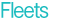
<style>
.page{position:relative;width:82px;height:21px;background:#ffffff}
.page>*{position:absolute;margin:0}
.t1{font:20px "GothicMB101Pro-Regular";letter-spacing:-0.06em;color:#1dbcc0;scale:0.9 1}
</style>
<div class="page">
<p class="t1" style="left:1px;top:2px;width:48px;height:16px">Fleets</p>
</div>
